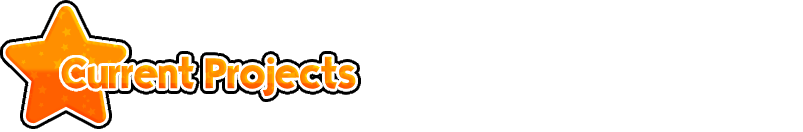
<style>
.page{position:relative;width:803px;height:132px;background:#ffffff}
.page>*{position:absolute;margin:0}
.t1{font:43px "Mouser"}
</style>
<div class="page">
<p class="t1" style="left:61px;top:56px;width:295px;height:40px">Current Projects</p>
</div>
